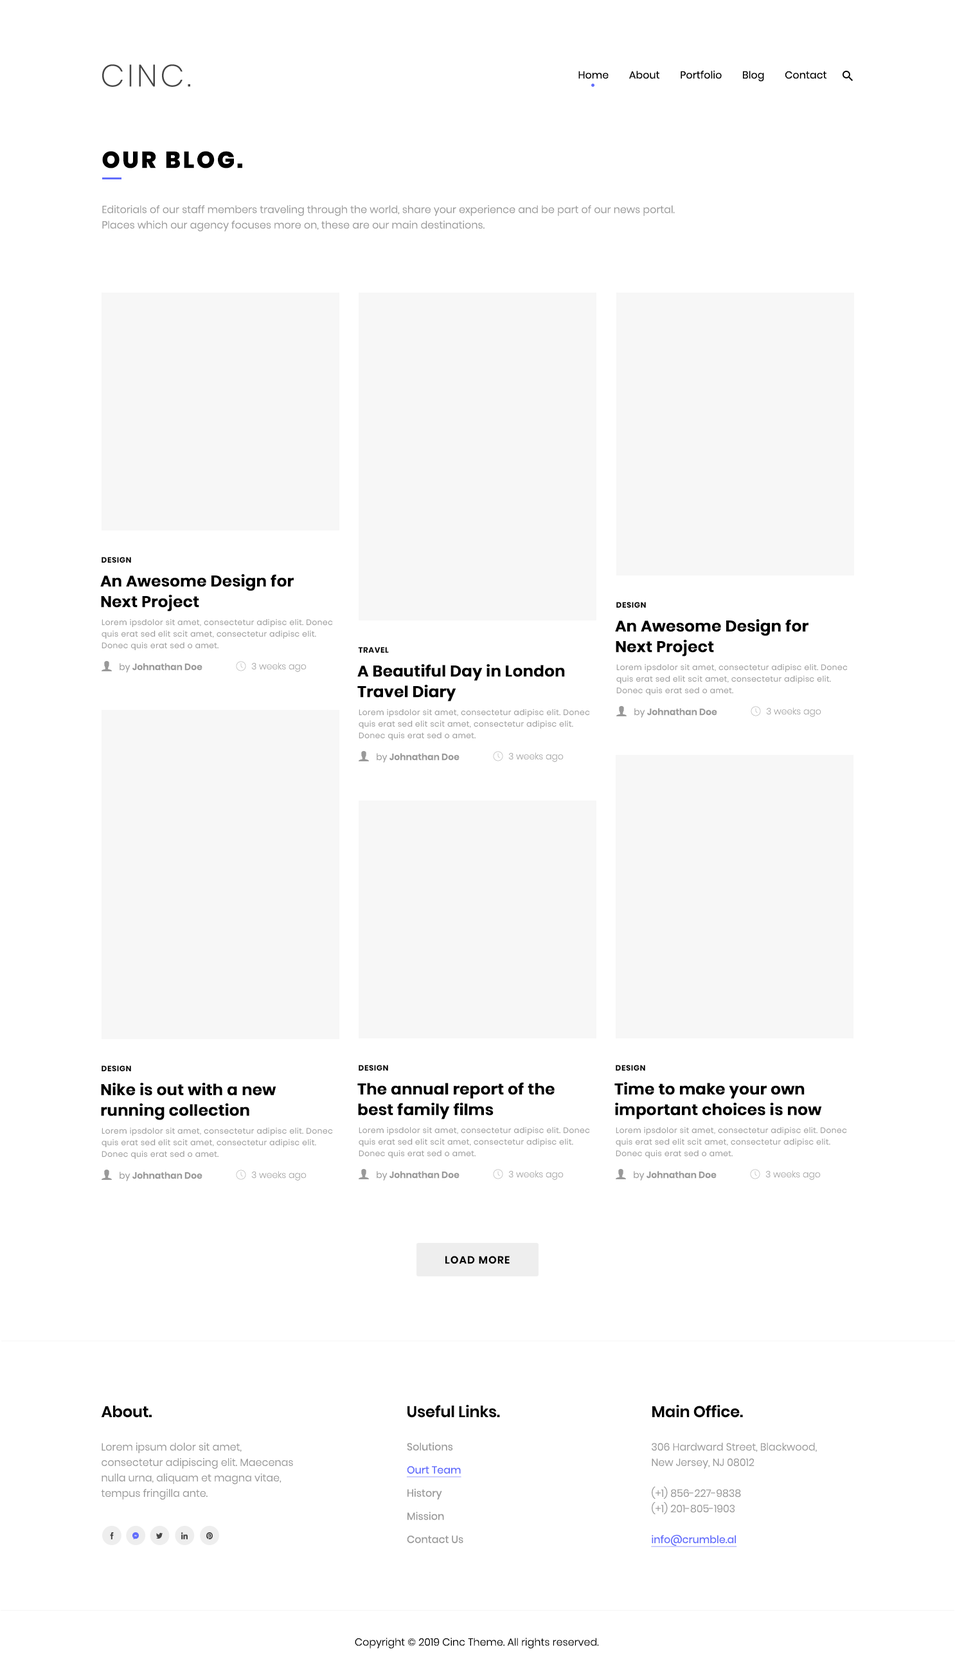
<style>
.page{position:relative;width:955px;height:1675px;background:#ffffff}
.page>*{position:absolute;margin:0}
.t1{font:30.9px "Poppins-ExtraLight";letter-spacing:0.1em;color:#454545}
.t2{font:10.3px "Poppins-Regular";color:#000000}
.t3{font:23.1px "Poppins-ExtraBold";letter-spacing:0.1em;color:#010101;text-transform:uppercase}
.t4{font:10.3px/15.4px "Poppins-Light";color:#999999}
.t5{font:7.7px "Poppins-Bold";letter-spacing:0.05em;color:#000000}
.t6{font:15.4px/20.6px "Poppins-SemiBold";color:#000000;font-weight:bold}
.t7{font:7.7px/11.6px "Poppins-Light";letter-spacing:0.05em;color:#999999}
.t8{font:9px "Poppins-SemiBold";color:#999999}
.t9{font:9px "Poppins-Light";color:#999999}
.t10{font:9px "Poppins-ExtraLight";color:#999999}
.t11{font:10.3px "Poppins-SemiBold";letter-spacing:0.075em;color:#010101}
.t12{font:15.4px "Poppins-SemiBold";color:#010101}
.t13{font:10.3px/23.1px "Poppins-Regular";color:#999999}
.t14{font:10.3px/23.1px "Poppins-Regular";color:#626dfc;text-decoration:underline}
.t15{font:10.3px/15.4px "Poppins-Regular";color:#626dfc;text-decoration:underline}
.t16{font:10.3px "Poppins-Light";color:#000000}
</style>
<div class="page">
<p class="t1" style="left:102px;top:64px;width:88px;height:23px">CINC.</p>
<p class="t2" style="left:579px;top:70px;width:248px;height:12px">Home        About        Portfolio        Blog        Contact</p>
<p class="t3" style="left:102px;top:151px;width:140px;height:17px">Our blog.</p>
<p class="t4" style="left:102px;top:205px;width:573px;height:26px">Editorials of our staff members traveling through the world, share your experience and be part of our news portal. <br>Places which our agency focuses more on, these are our main destinations.</p>
<p class="t5" style="left:102px;top:557px;width:29px;height:6px">DESIGN</p>
<p class="t6" style="left:100px;top:574px;width:194px;height:37px">An Awesome Design for<br>Next Project</p>
<p class="t5" style="left:616px;top:602px;width:30px;height:6px">DESIGN</p>
<p class="t7" style="left:102px;top:618px;width:231px;height:33px">Lorem ipsdolor sit amet, consectetur adipisc elit. Donec quis erat sed elit scit amet, consectetur adipisc elit. Donec quis erat sed o amet.</p>
<p class="t6" style="left:615px;top:619px;width:194px;height:37px">An Awesome Design for<br>Next Project</p>
<p class="t5" style="left:358px;top:647px;width:31px;height:6px">TRAVEL</p>
<p class="t8" style="left:120px;top:663px;width:83px;height:9px"><span class="t9">by </span>Johnathan Doe</p>
<p class="t10" style="left:251px;top:662px;width:56px;height:10px">3 weeks ago</p>
<p class="t6" style="left:357px;top:664px;width:208px;height:37px">A Beautiful Day in London<br>Travel Diary</p>
<p class="t7" style="left:616px;top:663px;width:232px;height:33px">Lorem ipsdolor sit amet, consectetur adipisc elit. Donec quis erat sed elit scit amet, consectetur adipisc elit. Donec quis erat sed o amet.</p>
<p class="t7" style="left:359px;top:708px;width:231px;height:33px">Lorem ipsdolor sit amet, consectetur adipisc elit. Donec quis erat sed elit scit amet, consectetur adipisc elit. Donec quis erat sed o amet.</p>
<p class="t8" style="left:634px;top:708px;width:83px;height:9px"><span class="t9">by </span>Johnathan Doe</p>
<p class="t10" style="left:766px;top:707px;width:56px;height:10px">3 weeks ago</p>
<p class="t8" style="left:377px;top:753px;width:83px;height:9px"><span class="t9">by </span>Johnathan Doe</p>
<p class="t10" style="left:509px;top:752px;width:55px;height:10px">3 weeks ago</p>
<p class="t5" style="left:102px;top:1065px;width:29px;height:7px">DESIGN</p>
<p class="t5" style="left:359px;top:1065px;width:29px;height:6px">DESIGN</p>
<p class="t5" style="left:616px;top:1065px;width:29px;height:6px">DESIGN</p>
<p class="t6" style="left:101px;top:1083px;width:175px;height:37px">Nike is out with a new <br>running collection</p>
<p class="t6" style="left:357px;top:1082px;width:198px;height:37px">The annual report of the <br>best family films</p>
<p class="t6" style="left:615px;top:1082px;width:207px;height:37px">Time to make your own <br>important choices is now</p>
<p class="t7" style="left:102px;top:1127px;width:231px;height:32px">Lorem ipsdolor sit amet, consectetur adipisc elit. Donec quis erat sed elit scit amet, consectetur adipisc elit. Donec quis erat sed o amet.</p>
<p class="t7" style="left:359px;top:1126px;width:231px;height:32px">Lorem ipsdolor sit amet, consectetur adipisc elit. Donec quis erat sed elit scit amet, consectetur adipisc elit. Donec quis erat sed o amet.</p>
<p class="t7" style="left:616px;top:1126px;width:231px;height:32px">Lorem ipsdolor sit amet, consectetur adipisc elit. Donec quis erat sed elit scit amet, consectetur adipisc elit. Donec quis erat sed o amet.</p>
<p class="t8" style="left:120px;top:1171px;width:83px;height:10px"><span class="t9">by </span>Johnathan Doe</p>
<p class="t10" style="left:251px;top:1171px;width:56px;height:9px">3 weeks ago</p>
<p class="t8" style="left:377px;top:1171px;width:83px;height:9px"><span class="t9">by </span>Johnathan Doe</p>
<p class="t10" style="left:509px;top:1170px;width:55px;height:10px">3 weeks ago</p>
<p class="t8" style="left:634px;top:1171px;width:83px;height:9px"><span class="t9">by </span>Johnathan Doe</p>
<p class="t10" style="left:766px;top:1170px;width:55px;height:10px">3 weeks ago</p>
<p class="t11" style="left:446px;top:1256px;width:64px;height:8px">LOAD MORE</p>
<p class="t12" style="left:101px;top:1405px;width:51px;height:13px">About.</p>
<p class="t12" style="left:408px;top:1404px;width:92px;height:14px">Useful Links.</p>
<p class="t12" style="left:652px;top:1404px;width:91px;height:14px">Main Office.</p>
<p class="t4" style="left:101px;top:1442px;width:192px;height:58px">Lorem ipsum dolor sit amet, consectetur adipiscing elit. Maecenas nulla urna, aliquam et magna vitae, tempus fringilla ante.</p>
<p class="t13" style="left:407px;top:1442px;width:57px;height:101px">Solutions<br><span class="t14">Ourt Team<br></span>History<br>Mission<br>Contact Us</p>
<p class="t4" style="left:651px;top:1442px;width:166px;height:105px">306 Hardward Street, Blackwood,<br>New Jersey, NJ 08012<br><br>(+1) 856-227-9838<br>(+1) 201-805-1903<br><br><span class="t15">info@crumble.al</span></p>
<p class="t16" style="left:355px;top:1637px;width:244px;height:11px">Copyright © 2019 Cinc Theme. All rights reserved.</p>
</div>
